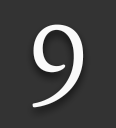
<style>
.page{position:relative;width:116px;height:128px;background:#333333}
.page>*{position:absolute;margin:0}
.t1{font:102px "KoPubWorldBatangMedium";color:#fafafa}
</style>
<div class="page">
<p class="t1" style="left:32px;top:24px;width:52px;height:84px">9</p>
</div>
